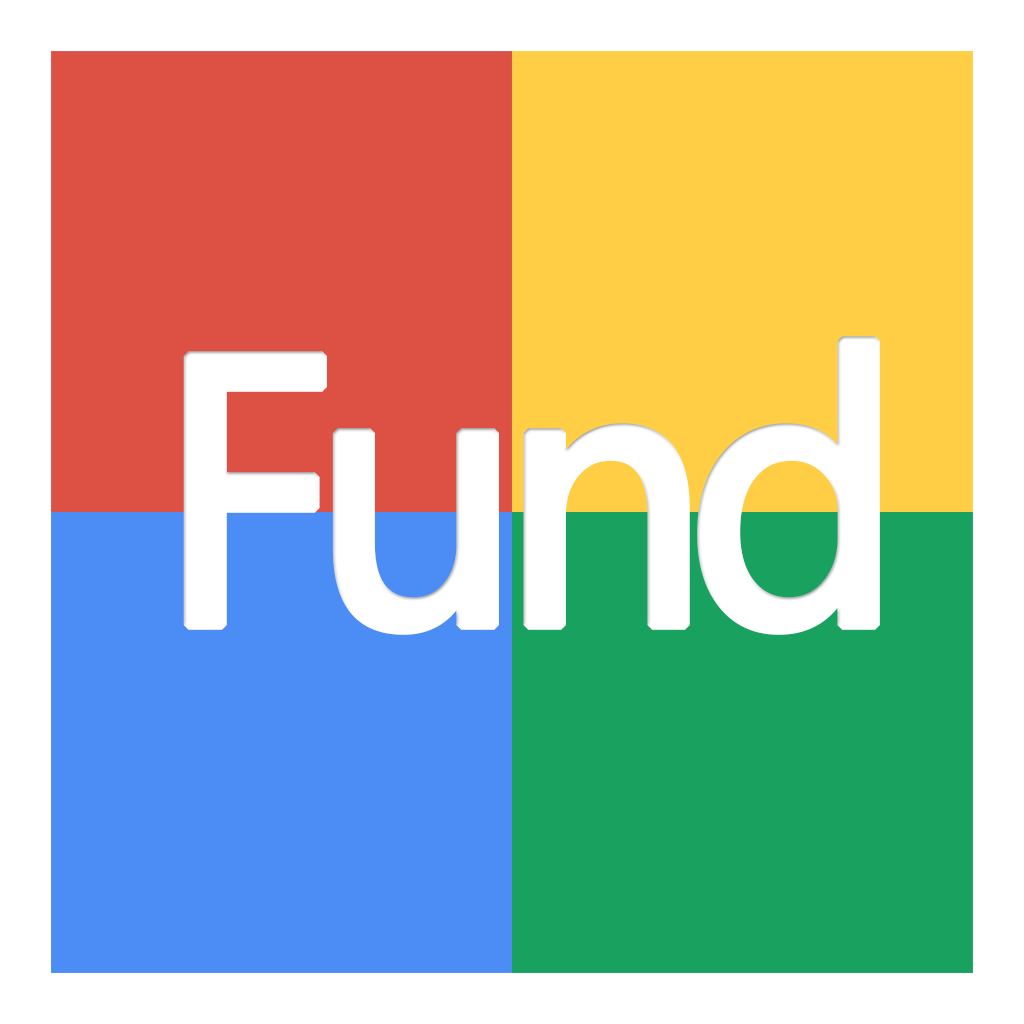
<style>
.page{position:relative;width:1024px;height:1024px;background:#ffffff}
.page>*{position:absolute;margin:0}
.t1{font:356.2px "MicrosoftYaHei";letter-spacing:-0.1em;color:#ffffff;font-weight:bold;scale:0.96 1}
</style>
<div class="page">
<p class="t1" style="left:183px;top:336px;width:697px;height:299px">Fund</p>
</div>
